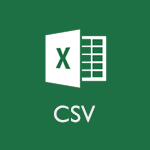
<style>
.page{position:relative;width:150px;height:150px;background:#1d7044}
.page>*{position:absolute;margin:0}
.t1{font:24px "GillSansMT";color:#efefef}
</style>
<div class="page">
<p class="t1" style="left:54px;top:105px;width:42px;height:18px">CSV</p>
</div>
